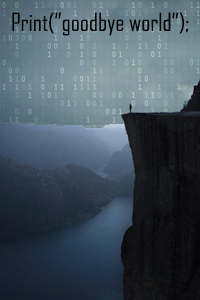
<style>
.page{position:relative;width:200px;height:300px}
.page>*{position:absolute;margin:0}
.t1{font:24px "AgencyFB-Reg";color:#060606}
</style>
<div class="page">
<p class="t1" style="left:12px;top:12px;width:177px;height:24px">Print(”goodbye world”);</p>
</div>
